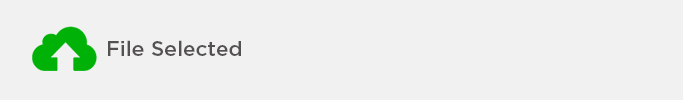
<style>
.page{position:relative;width:683px;height:100px;background:#f1f1f1}
.page>*{position:absolute;margin:0}
.t1{font:21px "Gotham-Medium";color:#535151}
</style>
<div class="page">
<p class="t1" style="left:108px;top:40px;width:133px;height:16px">File Selected</p>
</div>
